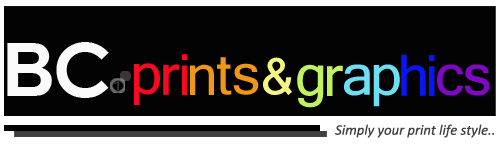
<style>
.page{position:relative;width:500px;height:150px;background:#030303}
.page>*{position:absolute;margin:0}
.t1{font:74.5px "Arial-BoldMT";color:#fbfafa}
.t2{font:74.8px "CenturyGothic-Bold";color:#fbfafa}
.t3{font:55px "Kartika";color:#f60a22}
.t4{font:55px "Kartika";color:#0717f2}
.t5{font:55px "Kartika";color:#f19717}
.t6{font:48.4px "Kartika";color:#f5f682}
.t7{font:55px "Kartika";color:#c1f361}
.t8{font:55px "Kartika";color:#6edef2}
.t9{font:55px "Kartika";color:#8008c5}
.t10{font:16.5px "Utsaah";color:#3f3b3b;scale:1.38 1}
.t11{font:14.6px "Calibri-Italic";color:#413f3f}
</style>
<div class="page">
<p class="t1" style="left:7px;top:43px;width:45px;height:53px">B</p>
<p class="t2" style="left:56px;top:42px;width:53px;height:56px">C</p>
<p class="t3" style="left:182px;top:54px;width:6px;height:41px">i</p>
<p class="t4" style="left:401px;top:54px;width:25px;height:42px">h</p>
<p class="t3" style="left:134px;top:63px;width:26px;height:42px">p</p>
<p class="t3" style="left:163px;top:64px;width:16px;height:31px">r</p>
<p class="t5" style="left:190px;top:64px;width:24px;height:31px">n</p>
<p class="t5" style="left:217px;top:57px;width:15px;height:38px">t</p>
<p class="t5" style="left:233px;top:63px;width:26px;height:32px">s</p>
<p class="t6" style="left:263px;top:57px;width:29px;height:38px">&amp;</p>
<p class="t7" style="left:297px;top:64px;width:27px;height:44px">g</p>
<p class="t7" style="left:327px;top:65px;width:16px;height:31px">r</p>
<p class="t8" style="left:344px;top:64px;width:26px;height:32px">a</p>
<p class="t8" style="left:373px;top:64px;width:27px;height:43px">p</p>
<p class="t4" style="left:429px;top:55px;width:6px;height:41px">i</p>
<p class="t9" style="left:437px;top:64px;width:26px;height:32px">c</p>
<p class="t9" style="left:464px;top:64px;width:26px;height:32px">s</p>
<p class="t10" style="left:114px;top:81px;width:5px;height:9px">1</p>
<p class="t11" style="left:335px;top:124px;width:159px;height:14px">Simply your print life style..</p>
</div>
